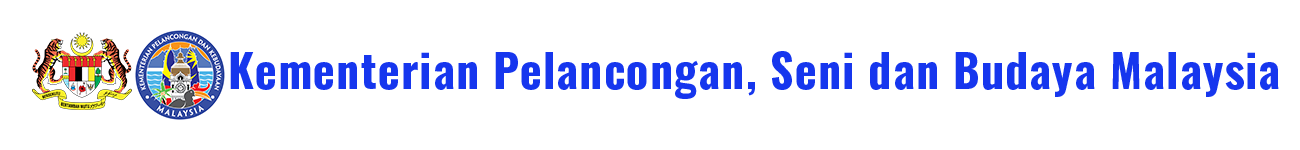
<style>
.page{position:relative;width:1300px;height:150px;background:#ffffff}
.page>*{position:absolute;margin:0}
.t1{font:45.8px "Oswald-Bold";letter-spacing:0.025em;color:#1636ee}
</style>
<div class="page">
<p class="t1" style="left:230px;top:51px;width:1049px;height:48px">Kementerian Pelancongan, Seni dan Budaya Malaysia</p>
</div>
